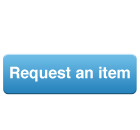
<style>
.page{position:relative;width:140px;height:130px;background:#ffffff}
.page>*{position:absolute;margin:0}
.t1{font:27px "Helvetica-Bold";color:#ffffff}
</style>
<div class="page">
<p class="t1" style="left:10px;top:66px;width:120px;height:16px">Request an item</p>
</div>
